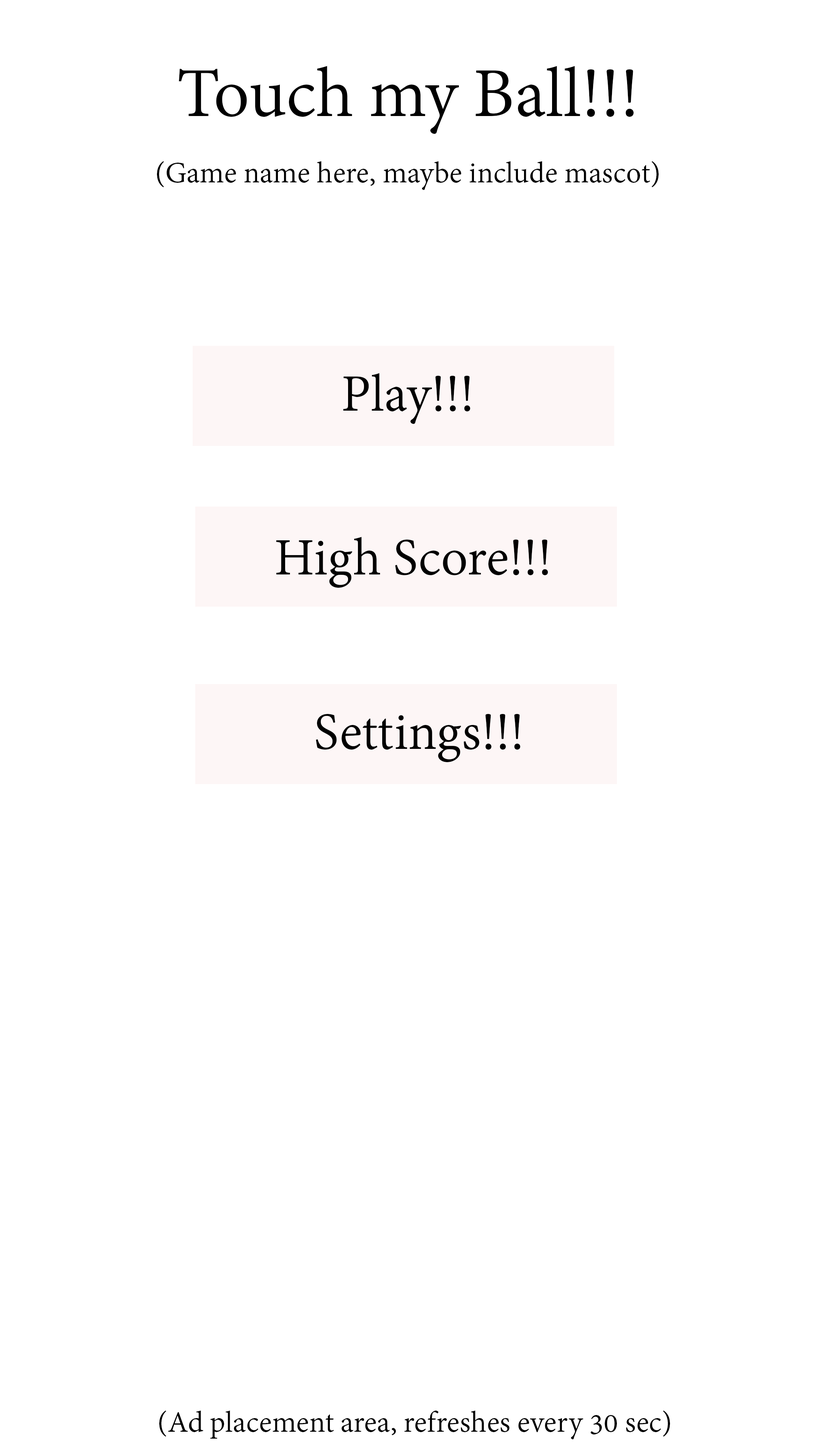
<style>
.page{position:relative;width:819px;height:1456px;background:#ffffff}
.page>*{position:absolute;margin:0}
.t1{font:75.8px "AdobeDevanagari-Regular";color:#000000}
.t2{font:32.2px "AdobeDevanagari-Regular";color:#000000}
.t3{font:56.9px "AdobeDevanagari-Regular";color:#000000}
</style>
<div class="page">
<p class="t1" style="left:179px;top:66px;width:455px;height:68px">Touch my Ball!!!</p>
<p class="t2" style="left:157px;top:161px;width:502px;height:29px">(Game name here, maybe include mascot)</p>
<p class="t3" style="left:343px;top:373px;width:127px;height:51px">Play!!!</p>
<p class="t3" style="left:276px;top:537px;width:272px;height:51px">High Score!!!</p>
<p class="t3" style="left:316px;top:714px;width:204px;height:48px">Settings!!!</p>
<p class="t2" style="left:159px;top:1410px;width:511px;height:29px">(Ad placement area, refreshes every 30 sec)</p>
</div>
